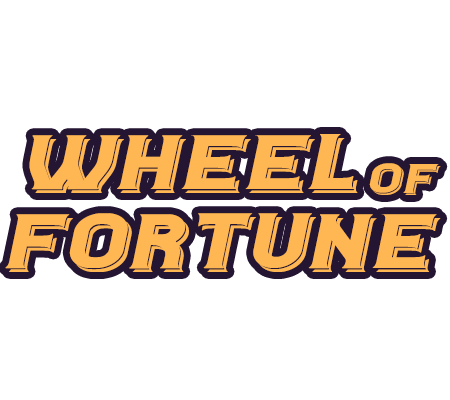
<style>
.page{position:relative;width:450px;height:400px;background:#ffffff}
.page>*{position:absolute;margin:0}
.t1{font:86.3px "CasinoFlatShadow-Italic";color:#ffb754;scale:1.35 1}
.t2{font:46.5px "CasinoFlatShadow-Italic";color:#ffb754;scale:1.35 1}
.t3{font:86.3px "CasinoFlatShadow-Italic";color:#ffb754;scale:1.32 1}
</style>
<div class="page">
<p class="t1" style="left:29px;top:134px;width:329px;height:59px">Wheel</p>
<p class="t2" style="left:369px;top:163px;width:72px;height:32px">of</p>
<p class="t3" style="left:5px;top:213px;width:436px;height:59px">Fortune</p>
</div>
